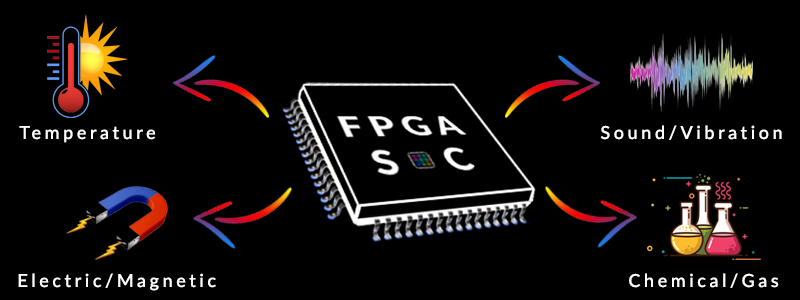
<style>
.page{position:relative;width:800px;height:300px;background:#000000}
.page>*{position:absolute;margin:0}
.t1{font:18px "Lato-Medium";letter-spacing:0.2em;color:#ffffff}
</style>
<div class="page">
<p class="t1" style="left:19px;top:126px;width:136px;height:17px">Temperature</p>
<p class="t1" style="left:600px;top:125px;width:182px;height:15px">Sound/Vibration</p>
<p class="t1" style="left:18px;top:273px;width:198px;height:18px">Electric/Magnetic</p>
<p class="t1" style="left:629px;top:273px;width:150px;height:15px">Chemical/Gas</p>
</div>
